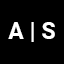
<style>
.page{position:relative;width:64px;height:64px;background:#000000}
.page>*{position:absolute;margin:0}
.t1{font:23.3px "Roboto-Bold";color:#ffffff}
</style>
<div class="page">
<p class="t1" style="left:8px;top:22px;width:47px;height:20px">A | S</p>
</div>
